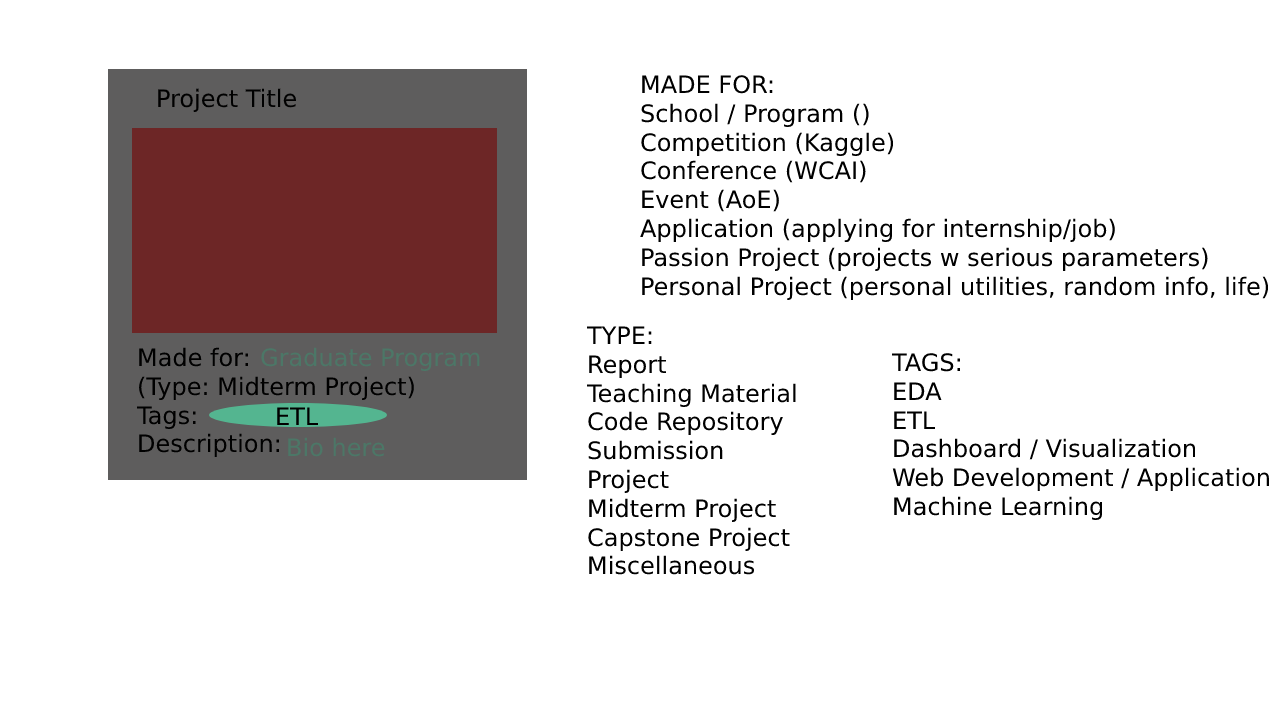
<style>
.page{position:relative;width:1280px;height:720px;background:#ffffff}
.page>*{position:absolute;margin:0}
.t1{font:24px "DejaVuSans";color:#000000}
.t2{font:24px "DejaVuSans";color:#4c7767}
</style>
<div class="page">
<p class="t1" style="left:640px;top:75px;width:629px;height:225px">MADE FOR:<br>School / Program ()<br>Competition (Kaggle)<br>Conference (WCAI)<br>Event (AoE)<br>Application (applying for internship/job)<br>Passion Project (projects w serious parameters)<br>Personal Project (personal utilities, random info, life)</p>
<p class="t1" style="left:158px;top:88px;width:138px;height:24px">Project Title</p>
<p class="t1" style="left:586px;top:326px;width:210px;height:249px">TYPE:<br>Report<br>Teaching Material<br>Code Repository<br>Submission<br>Project<br>Midterm Project<br>Capstone Project<br>Miscellaneous</p>
<p class="t1" style="left:136px;top:347px;width:278px;height:110px">Made for:<br>(Type: Midterm Project)<br>Tags:<br>Description:</p>
<p class="t2" style="left:261px;top:347px;width:219px;height:24px">Graduate Program</p>
<p class="t1" style="left:891px;top:353px;width:378px;height:167px">TAGS:<br>EDA<br>ETL<br>Dashboard / Visualization<br>Web Development / Application<br>Machine Learning</p>
<p class="t1" style="left:277px;top:407px;width:42px;height:18px">ETL</p>
<p class="t2" style="left:288px;top:437px;width:97px;height:20px">Bio here</p>
</div>
